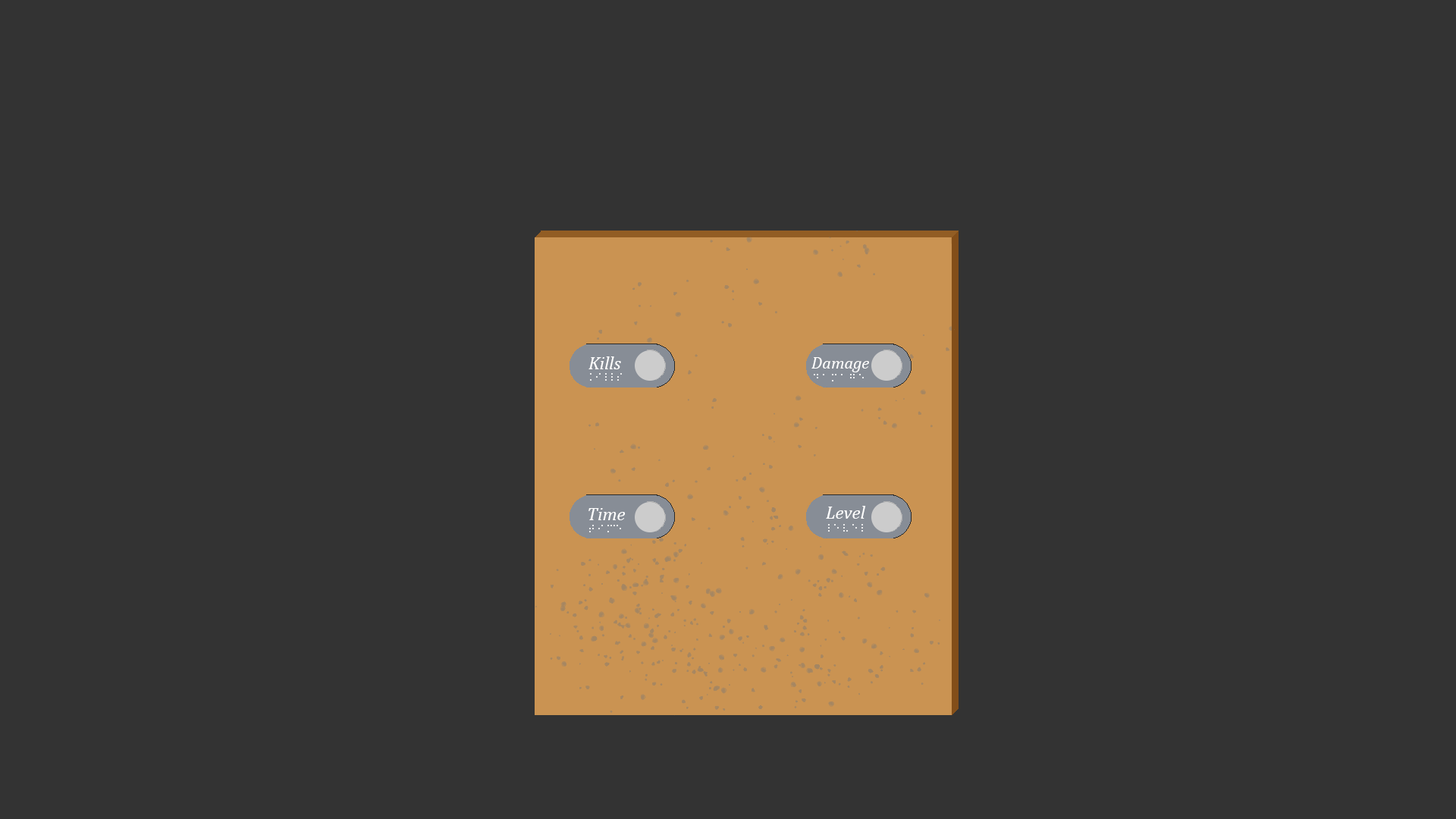
<style>
.page{position:relative;width:1456px;height:819px;background:#333333}
.page>*{position:absolute;margin:0}
.t1{font:18.2px "Cambria-Italic";color:#ffffff}
.t2{font:16.7px "Cambria-Italic";color:#ffffff}
</style>
<div class="page">
<p class="t1" style="left:588px;top:356px;width:33px;height:13px">Kills</p>
<p class="t2" style="left:811px;top:357px;width:58px;height:15px">Damage</p>
<p class="t1" style="left:588px;top:508px;width:38px;height:12px">Time</p>
<p class="t1" style="left:826px;top:506px;width:40px;height:13px">Level</p>
</div>
